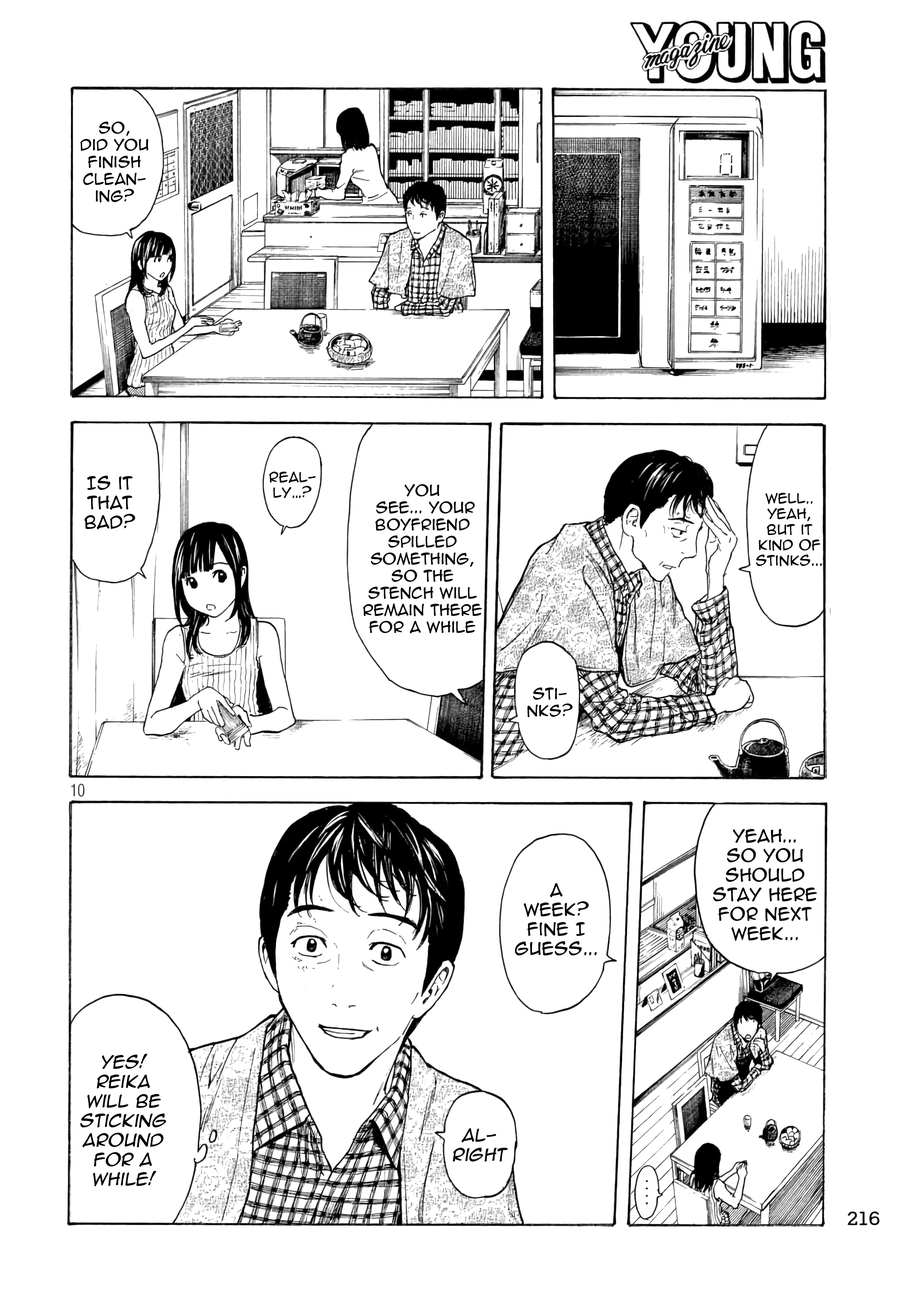
<style>
.page{position:relative;width:916px;height:1301px;background:#ffffff}
.page>*{position:absolute;margin:0}
.t1{font:14.2px "AnimeAce2.0BB";color:#000000}
.t2{font:13px "AnimeAce2.0BB";color:#000000}
.t3{font:16.3px "AnimeAce2.0BB";color:#000000}
.t4{font:16.3px "AnimeAce2.0BB";color:#000000;font-style:italic}
</style>
<div class="page">
<p class="t1" style="left:81px;top:122px;width:67px;height:80px;text-align:center">So, <br>did you finish clean-<br>ing?</p>
<p class="t2" style="left:269px;top:472px;width:47px;height:26px;text-align:center">Real-<br>ly…?</p>
<p class="t3" style="left:85px;top:476px;width:50px;height:53px;text-align:center">Is it that bad?</p>
<p class="t1" style="left:363px;top:484px;width:119px;height:149px;text-align:center">You<br> see... your boyfriend spilled something, so the <br>stench will remain there for a while</p>
<p class="t2" style="left:756px;top:493px;width:67px;height:73px;text-align:center">Well.. Yeah, but it kind of stinks...</p>
<p class="t1" style="left:528px;top:688px;width:45px;height:29px;text-align:center">Sti-<br>nks?</p>
<p class="t3" style="left:714px;top:829px;width:104px;height:112px;text-align:center">Yeah... <br>So you should stay here for next week...</p>
<p class="t3" style="left:515px;top:883px;width:82px;height:73px;text-align:center">A <br>week? Fine I guess...</p>
<p class="t4" style="left:80px;top:1054px;width:86px;height:132px;text-align:center">Yes! <br>Reika <br>will be sticking around <br>for a <br>while!</p>
<p class="t4" style="left:453px;top:1128px;width:55px;height:34px;text-align:center">Al-<br>right</p>
</div>
